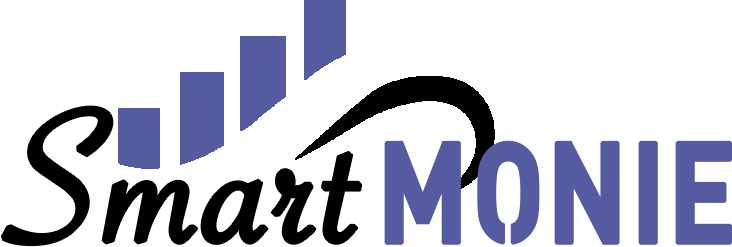
<style>
.page{position:relative;width:732px;height:247px;background:#ffffff}
.page>*{position:absolute;margin:0}
.t1{font:200px "SavoyeLetPlain";color:#000000;font-weight:bold}
.t2{font:141px "Streetvertising-Bold";color:#555ba0;font-weight:bold;scale:0.8 1}
</style>
<div class="page">
<p class="t1" style="left:1px;top:106px;width:361px;height:140px">Smart</p>
<p class="t2" style="left:384px;top:140px;width:348px;height:105px">MONIE</p>
</div>
